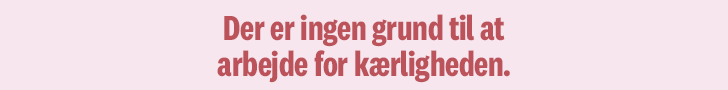
<style>
.page{position:relative;width:728px;height:90px;background:#f8e6ef}
.page>*{position:absolute;margin:0}
.t1{font:36px/36px "National2Condensed-Bold";letter-spacing:-0.008em;color:#bc535a}
</style>
<div class="page">
<p class="t1" style="left:217px;top:14px;width:293px;height:69px;text-align:center">Der er ingen grund til at<br>arbejde for kærligheden.</p>
</div>
